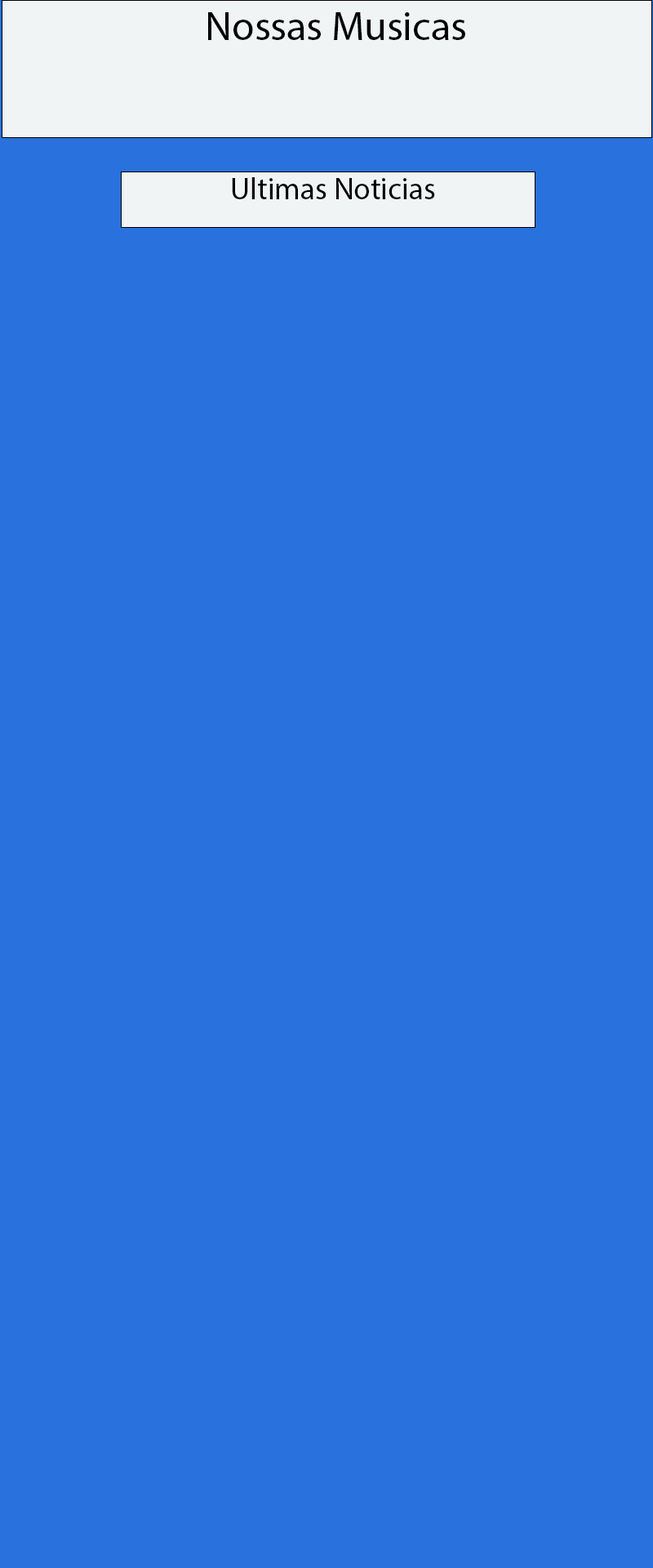
<style>
.page{position:relative;width:653px;height:1568px;background:#2971dc}
.page>*{position:absolute;margin:0}
.t1{font:40.8px "MyriadPro-Regular";color:#000000}
.t2{font:30.6px "MyriadPro-Regular";color:#000000}
</style>
<div class="page">
<p class="t1" style="left:208px;top:12px;width:258px;height:28px">Nossas Musicas</p>
<p class="t2" style="left:232px;top:177px;width:203px;height:22px">Ultimas Noticias</p>
</div>
